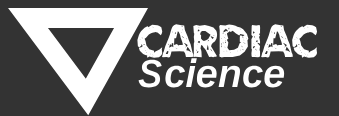
<style>
.page{position:relative;width:339px;height:116px;background:#333333}
.page>*{position:absolute;margin:0}
.t1{font:51px "Umbrage";color:#ffffff}
.t2{font:39px "UnBPro-BoldItalic";color:#ffffff}
</style>
<div class="page">
<p class="t1" style="left:137px;top:24px;width:181px;height:34px">cardiac</p>
<p class="t2" style="left:138px;top:58px;width:147px;height:30px">Science</p>
</div>
